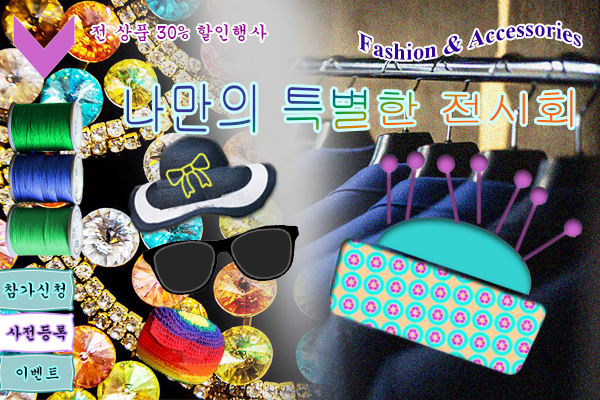
<style>
.page{position:relative;width:600px;height:400px}
.page>*{position:absolute;margin:0}
.t1{font:18px "Gungsuh";color:#990099}
.t2{font:23.2px "TimesNewRomanPS-BoldMT";color:#330099}
.t3{font:47.6px "Gulim"}
</style>
<div class="page">
<p class="t1" style="left:91px;top:23px;width:176px;height:19px">전 상품 30% 할인행사</p>
<p class="t2" style="left:359px;top:22px;width:222px;height:38px">Fashion &amp; Accessories</p>
<p class="t3" style="left:126px;top:83px;width:447px;height:50px">나만의 특별한 전시회</p>
</div>
